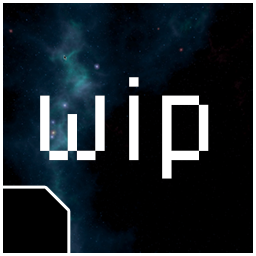
<style>
.page{position:relative;width:256px;height:256px;background:#000000}
.page>*{position:absolute;margin:0}
.t1{font:147px "PixelOperator";letter-spacing:0.04em;color:#ffffff}
</style>
<div class="page">
<p class="t1" style="left:40px;top:77px;width:169px;height:102px">wip</p>
</div>
